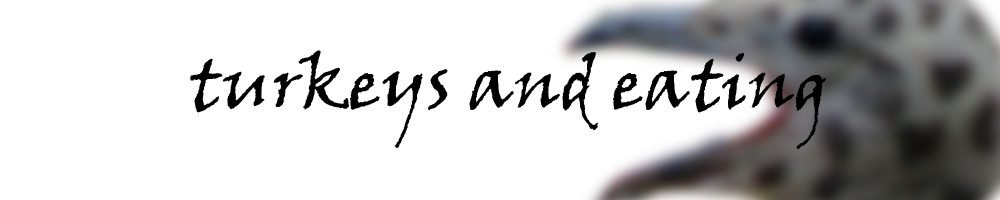
<style>
.page{position:relative;width:1000px;height:200px;background:#ffffff}
.page>*{position:absolute;margin:0}
.t1{font:72px "VinerHandITC";color:#000000}
</style>
<div class="page">
<p class="t1" style="left:190px;top:50px;width:636px;height:100px">turkeys and eating</p>
</div>
